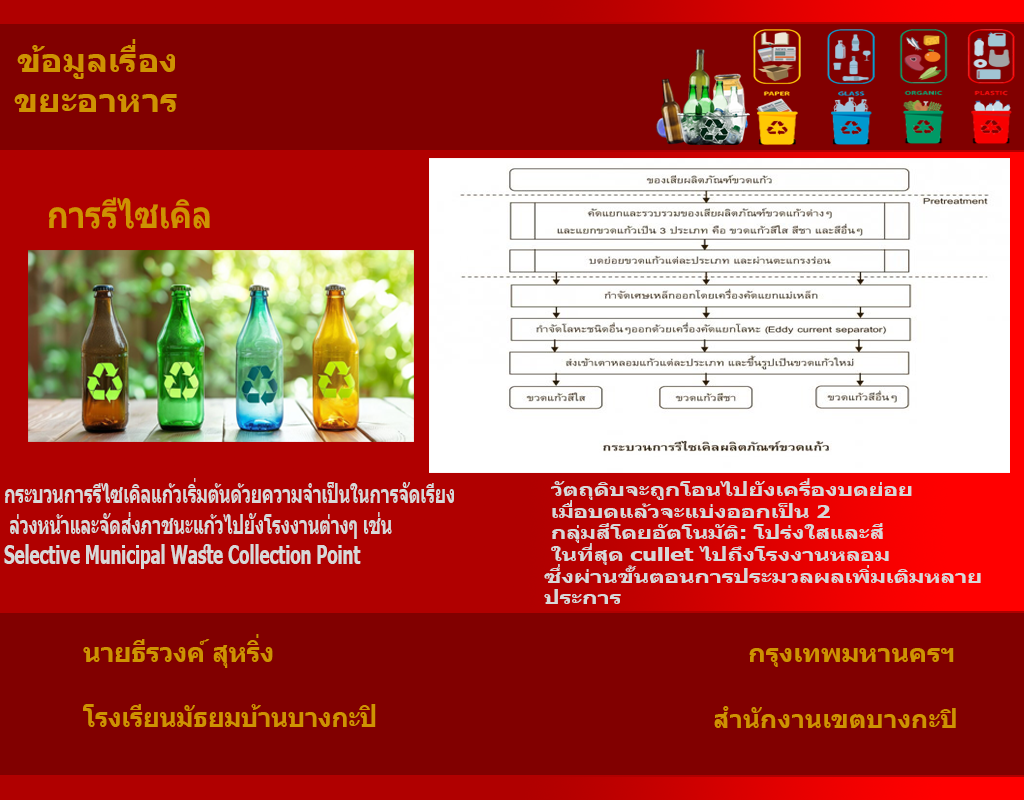
<style>
.page{position:relative;width:1024px;height:800px;background:#810000}
.page>*{position:absolute;margin:0}
.t1{font:33.2px "Tahoma-Bold";color:#ce9202;scale:1.03 1}
.t2{font:37.1px "Tahoma-Bold";color:#ce9202;scale:0.85 1}
.t3{font:25.4px "Tahoma-Bold";color:#d8d8d8;scale:0.66 1}
.t4{font:18.1px "Tahoma-Bold";color:#d8d8d8;scale:1.25 1}
.t5{font:28.2px "Tahoma-Bold";color:#ce9202;scale:0.91 1}
.t6{font:25px "Tahoma-Bold";color:#ce9202;scale:1.04 1}
.t7{font:28.1px "Tahoma-Bold";color:#ce9202;scale:0.88 1}
.t8{font:25px "Tahoma-Bold";color:#ce9202}
</style>
<div class="page">
<p class="t1" style="left:14px;top:39px;width:163px;height:73px">ข้อมูลเรื่อง<br>ขยะอาหาร</p>
<p class="t2" style="left:49px;top:197px;width:161px;height:32px">การรีไซเคิล</p>
<p class="t3" style="left:4px;top:478px;width:450px;height:91px;text-align:right">กระบวนการรีไซเคิลแก้วเริ่มต้นด้วยความจำเป็นในการจัดเรียง<br>ล่วงหน้าและจัดส่งภาชนะแก้วไปยังโรงงานต่างๆ เช่น <br>Selective Municipal Waste Collection Point</p>
<p class="t4" style="left:544px;top:478px;width:437px;height:126px;text-align:right">วัตถุดิบจะถูกโอนไปยังเครื่องบดย่อย <br>เมื่อบดแล้วจะแบ่งออกเป็น 2 <br>กลุ่มสีโดยอัตโนมัติ: โปร่งใสและสี <br>ในที่สุด cullet ไปถึงโรงงานหลอม <br>ซึ่งผ่านขั้นตอนการประมวลผลเพิ่มเติมหลาย<br>ประการ</p>
<p class="t5" style="left:83px;top:634px;width:190px;height:34px">นายธีรวงค์ สุหริ่ง</p>
<p class="t6" style="left:749px;top:648px;width:205px;height:19px">กรุงเทพมหานครฯ</p>
<p class="t7" style="left:83px;top:704px;width:293px;height:23px">โรงเรียนมัธยมบ้านบางกะปิ</p>
<p class="t8" style="left:714px;top:706px;width:242px;height:22px">สำนักงานเขตบางกะปิ</p>
</div>
